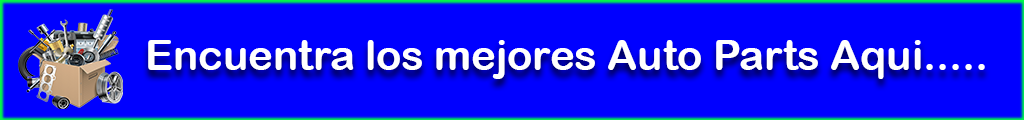
<style>
.page{position:relative;width:1024px;height:120px;background:#0000ff}
.page>*{position:absolute;margin:0}
.t1{font:41.7px "ArialRoundedMTBold";color:#ffffff}
</style>
<div class="page">
<p class="t1" style="left:148px;top:40px;width:837px;height:39px">Encuentra los mejores Auto Parts Aqui.....</p>
</div>
